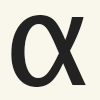
<style>
.page{position:relative;width:100px;height:100px;background:#f9f7eb}
.page>*{position:absolute;margin:0}
.t1{font:128.6px "LucidaGrande";color:#222222}
</style>
<div class="page">
<p class="t1" style="left:11px;top:15px;width:75px;height:72px">α</p>
</div>
